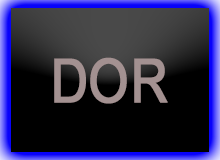
<style>
.page{position:relative;width:220px;height:160px;background:#000000}
.page>*{position:absolute;margin:0}
.t1{font:60.8px "ArialMT";color:#a49191;font-weight:bold;scale:0.84 1}
</style>
<div class="page">
<p class="t1" style="left:54px;top:57px;width:114px;height:47px">DOR</p>
</div>
